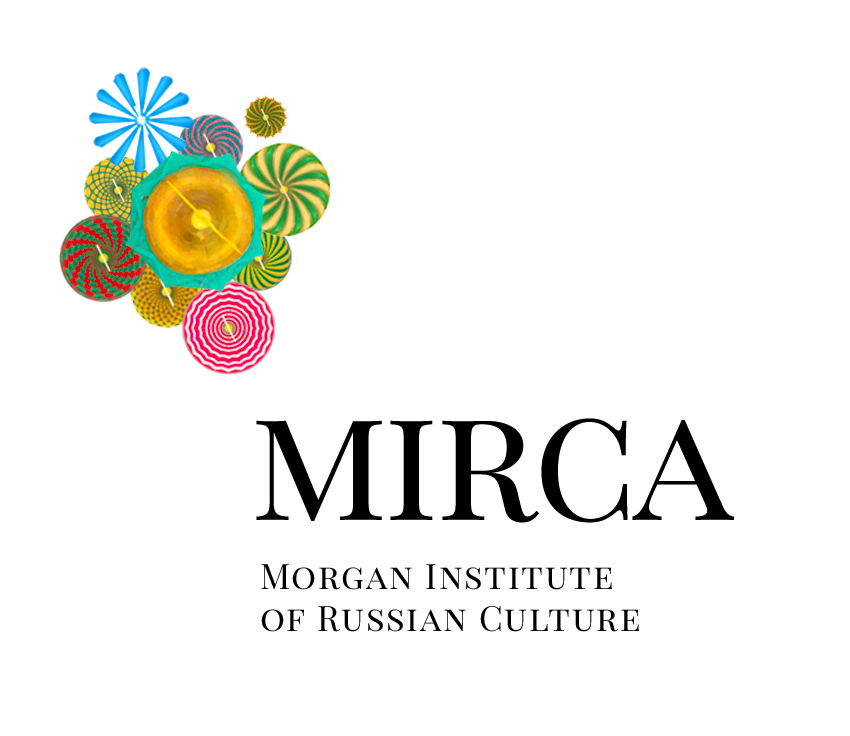
<style>
.page{position:relative;width:850px;height:736px;background:#fefffe}
.page>*{position:absolute;margin:0}
.t1{font:163px "PlayfairDisplaySC-Regular";letter-spacing:-0.025em;color:#000000}
.t2{font:34.7px "PlayfairDisplaySC-Regular";letter-spacing:0.05em;color:#000000}
</style>
<div class="page">
<p class="t1" style="left:256px;top:418px;width:478px;height:105px">mirca</p>
<p class="t2" style="left:261px;top:564px;width:378px;height:68px">Morgan Institute<br>of Russian Culture</p>
</div>
